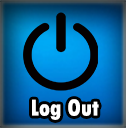
<style>
.page{position:relative;width:126px;height:128px}
.page>*{position:absolute;margin:0}
.t1{font:24px "TwCenMT-CondensedExtraBold";color:#ffffff}
</style>
<div class="page">
<p class="t1" style="left:32px;top:99px;width:67px;height:21px">Log Out</p>
</div>
